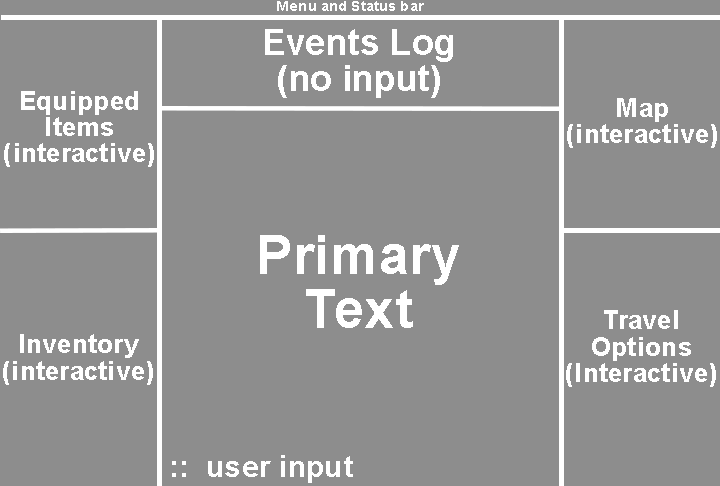
<style>
.page{position:relative;width:720px;height:486px;background:#8d8d8d}
.page>*{position:absolute;margin:0}
.t1{font:14.4px "Arial-BoldMT";letter-spacing:0.01em;color:#ffffff}
.t2{font:36px "Arial-BoldMT";letter-spacing:0.01em;color:#ffffff}
.t3{font:26.4px "Arial-BoldMT";letter-spacing:0.01em;color:#ffffff}
.t4{font:54px "Arial-BoldMT";letter-spacing:0.01em;color:#ffffff}
.t5{font:30px "Arial-BoldMT";letter-spacing:0.01em;color:#ffffff}
</style>
<div class="page">
<p class="t1" style="left:277px;top:1px;width:147px;height:10px">Menu and Status bar</p>
<p class="t2" style="left:265px;top:29px;width:188px;height:69px;text-align:center">Events Log<br>(no input)</p>
<p class="t3" style="left:4px;top:91px;width:150px;height:76px;text-align:center">Equipped<br>Items<br>(interactive)</p>
<p class="t3" style="left:567px;top:98px;width:150px;height:50px;text-align:center">Map<br>(interactive)</p>
<p class="t4" style="left:260px;top:235px;width:199px;height:93px;text-align:center">Primary<br>Text</p>
<p class="t3" style="left:566px;top:310px;width:150px;height:77px;text-align:center">Travel<br>Options<br>(Interactive)</p>
<p class="t3" style="left:3px;top:334px;width:150px;height:51px;text-align:center">Inventory<br>(interactive)</p>
<p class="t5" style="left:172px;top:455px;width:181px;height:28px">::  user input</p>
</div>
